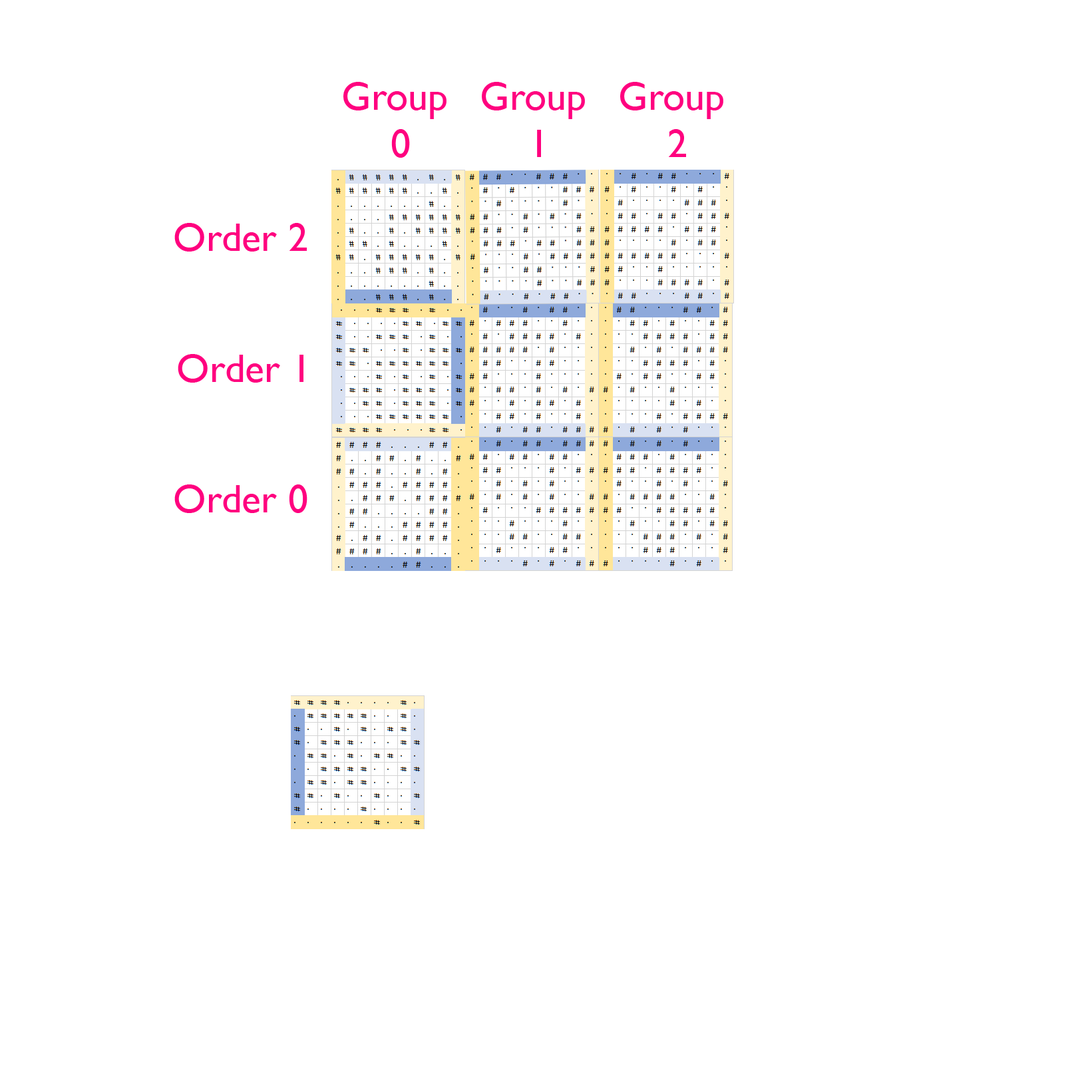
<style>
.page{position:relative;width:1092px;height:1092px;background:#ffffff}
.page>*{position:absolute;margin:0}
.t1{font:39.9px "GillSansMT";color:#ff007f}
</style>
<div class="page">
<p class="t1" style="left:343px;top:82px;width:104px;height:76px;text-align:center">Group <br>0</p>
<p class="t1" style="left:482px;top:82px;width:103px;height:75px;text-align:center">Group <br>1</p>
<p class="t1" style="left:620px;top:82px;width:103px;height:75px;text-align:center">Group <br>2</p>
<p class="t1" style="left:174px;top:223px;width:133px;height:29px">Order 2</p>
<p class="t1" style="left:178px;top:354px;width:125px;height:29px">Order 1</p>
<p class="t1" style="left:174px;top:484px;width:133px;height:29px">Order 0</p>
</div>
